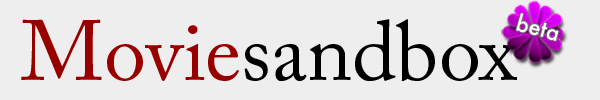
<style>
.page{position:relative;width:600px;height:100px;background:#eeeeee}
.page>*{position:absolute;margin:0}
.t1{font:21.8px "Futura-Medium";color:#ffffff}
.t2{font:84.4px "ACaslonPro-Regular";color:#000000}
.t3{font:84.4px "ACaslonPro-Regular";color:#980000}
</style>
<div class="page">
<p class="t1" style="left:516px;top:13px;width:43px;height:28px;rotate:15deg">beta</p>
<p class="t2" style="left:21px;top:19px;width:496px;height:62px"><span class="t3">Movie</span>sandbox</p>
</div>
